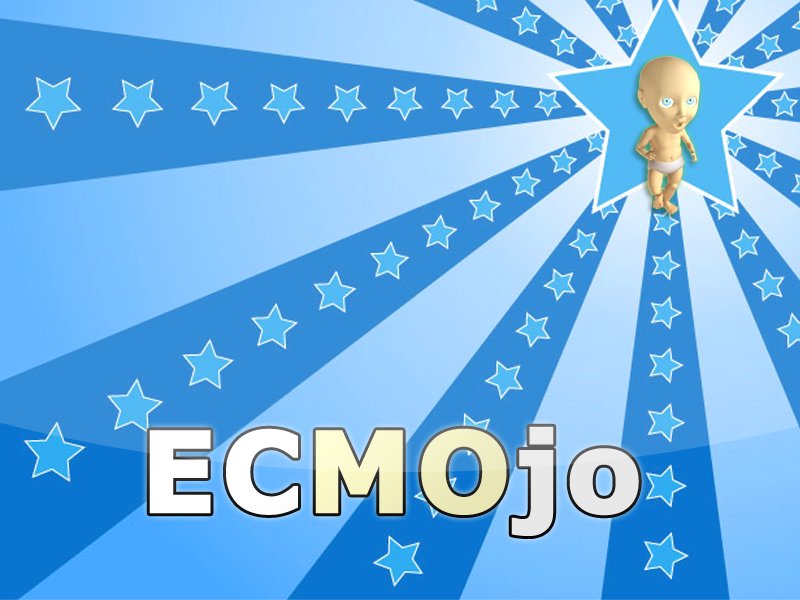
<style>
.page{position:relative;width:800px;height:600px}
.page>*{position:absolute;margin:0}
.t1{font:110px "Verdana-Bold";letter-spacing:0.025em;color:#ffffff;font-weight:bold}
.t2{font:110px "Verdana-Bold";letter-spacing:0.025em;color:#fffdc7;font-weight:bold}
</style>
<div class="page">
<p class="t1" style="left:149px;top:426px;width:490px;height:110px">EC<span class="t2">MO</span>jo</p>
</div>
